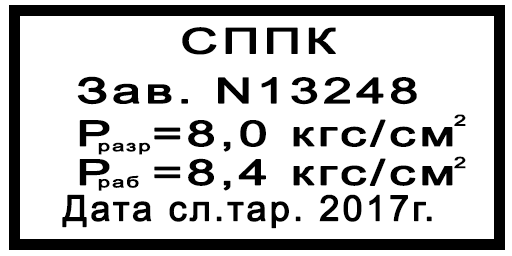
<style>
.page{position:relative;width:512px;height:256px;background:#ffffff}
.page>*{position:absolute;margin:0}
.t1{font:60.7px "ArialMT";letter-spacing:0.06em;color:#000000;font-weight:bold;scale:1.46 1}
.t2{font:26.2px "ArialMT";letter-spacing:0.06em;color:#000000;font-weight:bold;scale:1.45 1}
.t3{font:60.7px "ArialMT";letter-spacing:0.06em;color:#000000;font-weight:bold}
</style>
<div class="page">
<p class="t1" style="left:182px;top:27px;width:154px;height:28px">СППК</p>
<p class="t1" style="left:77px;top:76px;width:340px;height:29px">Зав. N13248</p>
<p class="t1" style="left:79px;top:119px;width:374px;height:33px">P  =8,0 кгс/см</p>
<p class="t2" style="left:454px;top:114px;width:12px;height:12px">2</p>
<p class="t2" style="left:98px;top:142px;width:53px;height:13px">разр</p>
<p class="t1" style="left:79px;top:158px;width:374px;height:33px">P  =8,4 кгс/см</p>
<p class="t2" style="left:454px;top:156px;width:12px;height:13px">2</p>
<p class="t2" style="left:98px;top:175px;width:41px;height:16px">раб</p>
<p class="t3" style="left:62px;top:194px;width:370px;height:35px">Дата сл.тар. 2017г.</p>
</div>
